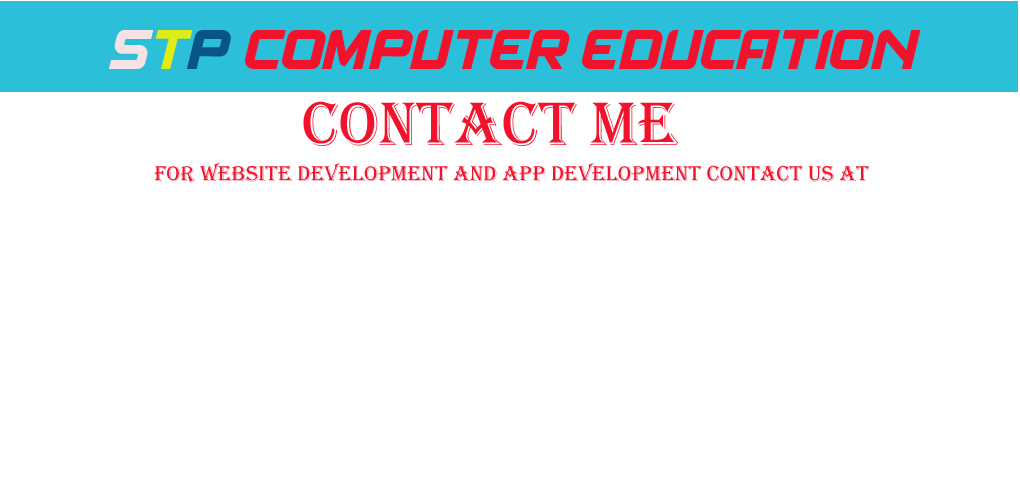
<style>
.page{position:relative;width:1020px;height:480px;background:#ffffff}
.page>*{position:absolute;margin:0}
.t1{font:59.3px "Spantaran";color:#f2122b}
.t2{font:59.3px "Spantaran";color:#f4e2e4}
.t3{font:59.3px "Spantaran";color:#e0ec16}
.t4{font:59.3px "Spantaran";color:#09558a}
.t5{font:63.5px "Algerian";color:#f2122b}
.t6{font:22.2px "Algerian";color:#f2122b}
</style>
<div class="page">
<p class="t1" style="left:108px;top:30px;width:813px;height:116px"><span class="t2">S</span><span class="t3">T</span><span class="t4">P </span>COMPUTER EDUCATION<br>             <span class="t5">CONTACT ME</span></p>
<p class="t6" style="left:154px;top:162px;width:716px;height:21px">FOR WEBSITE DEVELOPMENT AND APP DEVELOPMENT CONTACT US AT</p>
</div>
